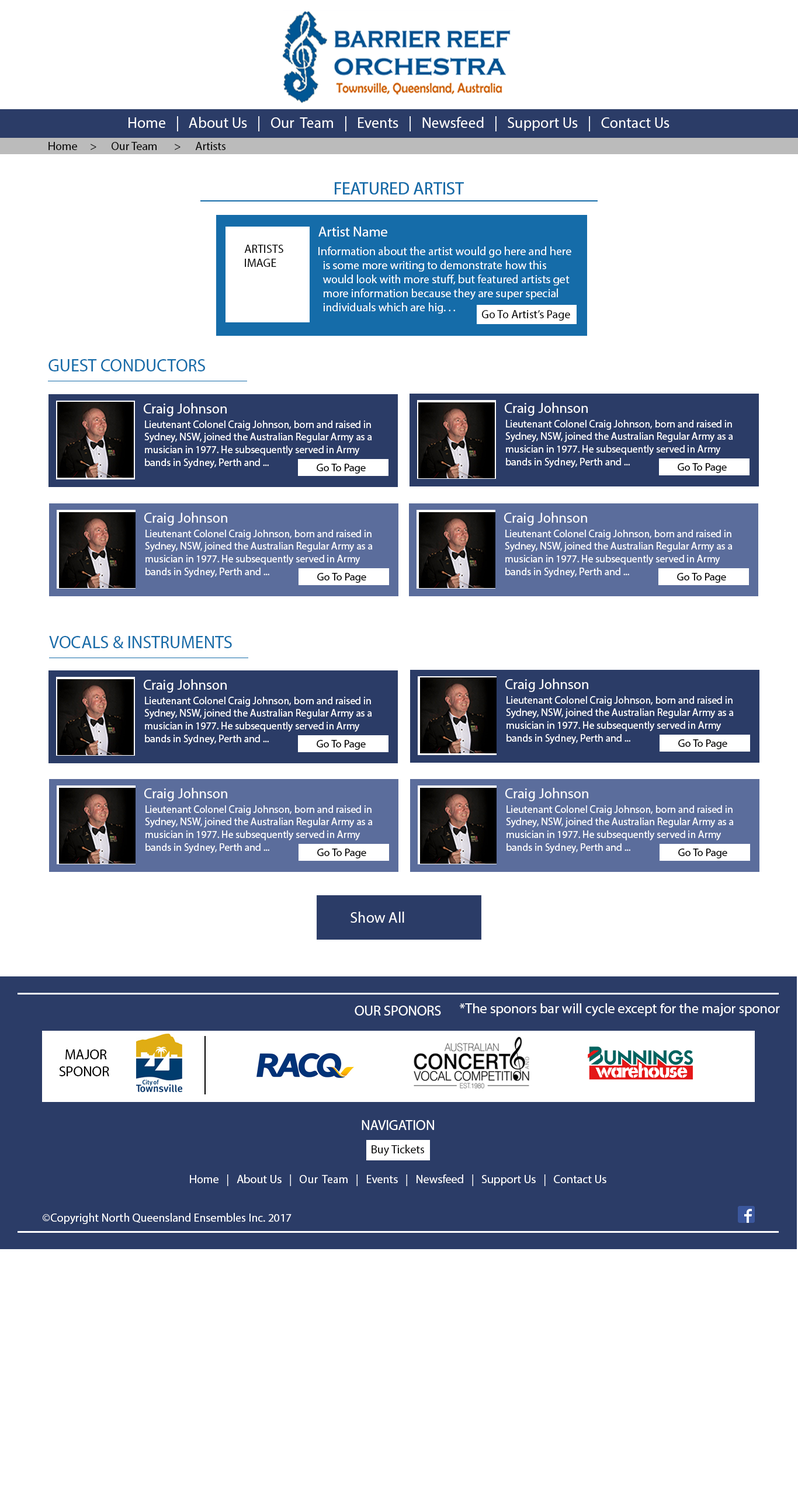
<style>
.page{position:relative;width:798px;height:1495px;background:#ffffff}
.page>*{position:absolute;margin:0}
.t1{font:11.7px "MyriadPro-Regular";color:#000000}
.t2{font:17.5px "MyriadPro-Regular";color:#156ca9}
.t3{font:14px "MyriadPro-Regular";color:#ffffff}
.t4{font:11.7px "MyriadPro-Regular";color:#ffffff}
.t5{font:14.6px "MyriadPro-Regular";color:#ffffff}
.t6{font:10.5px "MyriadPro-Regular";color:#ffffff}
.t7{font:10.9px "MyriadPro-Regular";color:#000000}
.t8{font:15.2px "MyriadPro-Regular";color:#ffffff}
</style>
<div class="page">
<p class="t1" style="left:48px;top:142px;width:177px;height:8px">Home &gt; Our Team &gt; Artists</p>
<p class="t2" style="left:335px;top:182px;width:129px;height:12px">FEATURED ARTIST</p>
<p class="t2" style="left:335px;top:182px;width:129px;height:12px">FEATURED ARTIST</p>
<p class="t3" style="left:318px;top:227px;width:69px;height:9px">Artist Name</p>
<p class="t1" style="left:244px;top:245px;width:39px;height:22px">ARTISTS<br>IMAGE</p>
<p class="t4" style="left:318px;top:246px;width:253px;height:68px">Information about the artist would go here and here <br>  is some more writing to demonstrate how this<br>  would look with more stuff, but featured artists get<br>  more information because they are super special<br>  individuals which are hig. . .</p>
<p class="t1" style="left:482px;top:310px;width:88px;height:11px">Go To Artist’s Page</p>
<p class="t2" style="left:48px;top:359px;width:157px;height:12px">GUEST CONDUCTORS</p>
<p class="t5" style="left:144px;top:403px;width:83px;height:13px">Craig Johnson</p>
<p class="t5" style="left:505px;top:402px;width:82px;height:14px">Craig Johnson</p>
<p class="t6" style="left:144px;top:420px;width:228px;height:48px">Lieutenant Colonel Craig Johnson, born and raised in <br>Sydney, NSW, joined the Australian Regular Army as a <br>musician in 1977. He subsequently served in Army <br>bands in Sydney, Perth and ...</p>
<p class="t6" style="left:505px;top:420px;width:228px;height:48px">Lieutenant Colonel Craig Johnson, born and raised in <br>Sydney, NSW, joined the Australian Regular Army as a <br>musician in 1977. He subsequently served in Army <br>bands in Sydney, Perth and ...</p>
<p class="t7" style="left:316px;top:464px;width:50px;height:10px">Go To Page</p>
<p class="t7" style="left:677px;top:463px;width:49px;height:10px">Go To Page</p>
<p class="t5" style="left:144px;top:512px;width:83px;height:14px">Craig Johnson</p>
<p class="t5" style="left:504px;top:512px;width:83px;height:14px">Craig Johnson</p>
<p class="t6" style="left:145px;top:530px;width:228px;height:48px">Lieutenant Colonel Craig Johnson, born and raised in <br>Sydney, NSW, joined the Australian Regular Army as a <br>musician in 1977. He subsequently served in Army <br>bands in Sydney, Perth and ...</p>
<p class="t6" style="left:505px;top:530px;width:227px;height:48px">Lieutenant Colonel Craig Johnson, born and raised in <br>Sydney, NSW, joined the Australian Regular Army as a <br>musician in 1977. He subsequently served in Army <br>bands in Sydney, Perth and ...</p>
<p class="t7" style="left:317px;top:573px;width:49px;height:10px">Go To Page</p>
<p class="t7" style="left:677px;top:573px;width:49px;height:10px">Go To Page</p>
<p class="t2" style="left:49px;top:636px;width:183px;height:12px">VOCALS &amp; INSTRUMENTS</p>
<p class="t5" style="left:144px;top:679px;width:83px;height:14px">Craig Johnson</p>
<p class="t5" style="left:505px;top:679px;width:83px;height:13px">Craig Johnson</p>
<p class="t6" style="left:144px;top:697px;width:228px;height:48px">Lieutenant Colonel Craig Johnson, born and raised in <br>Sydney, NSW, joined the Australian Regular Army as a <br>musician in 1977. He subsequently served in Army <br>bands in Sydney, Perth and ...</p>
<p class="t6" style="left:506px;top:696px;width:227px;height:48px">Lieutenant Colonel Craig Johnson, born and raised in <br>Sydney, NSW, joined the Australian Regular Army as a <br>musician in 1977. He subsequently served in Army <br>bands in Sydney, Perth and ...</p>
<p class="t7" style="left:316px;top:740px;width:50px;height:10px">Go To Page</p>
<p class="t7" style="left:678px;top:739px;width:49px;height:10px">Go To Page</p>
<p class="t5" style="left:144px;top:788px;width:83px;height:13px">Craig Johnson</p>
<p class="t5" style="left:505px;top:788px;width:83px;height:13px">Craig Johnson</p>
<p class="t6" style="left:145px;top:805px;width:228px;height:48px">Lieutenant Colonel Craig Johnson, born and raised in <br>Sydney, NSW, joined the Australian Regular Army as a <br>musician in 1977. He subsequently served in Army <br>bands in Sydney, Perth and ...</p>
<p class="t6" style="left:506px;top:805px;width:227px;height:48px">Lieutenant Colonel Craig Johnson, born and raised in <br>Sydney, NSW, joined the Australian Regular Army as a <br>musician in 1977. He subsequently served in Army <br>bands in Sydney, Perth and ...</p>
<p class="t7" style="left:317px;top:848px;width:49px;height:10px">Go To Page</p>
<p class="t7" style="left:678px;top:848px;width:49px;height:10px">Go To Page</p>
<p class="t8" style="left:350px;top:912px;width:54px;height:11px">Show All</p>
</div>
